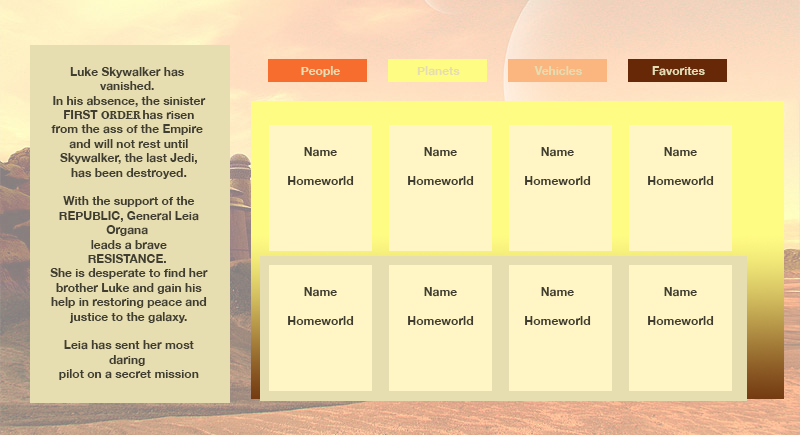
<style>
.page{position:relative;width:800px;height:435px;background:#fff5c5}
.page>*{position:absolute;margin:0}
.t1{font:12px "HelveticaNeue-Bold";color:#403d31}
.t2{font:12px "BodoniSvtyTwoITCTT-Bold";color:#403d31}
.t3{font:12px "HelveticaNeue-Bold";color:#e6ddb1}
</style>
<div class="page">
<p class="t1" style="left:50px;top:67px;width:158px;height:313px;text-align:center">Luke Skywalker has vanished.<br> In his absence, the sinister<br> FIRST <span class="t2">ORDER </span>has risen from the ass of the Empire<br> and will not rest until<br> Skywalker, the last Jedi,<br> has been destroyed.<br> <br> With the support of the<br> REPUBLIC, General Leia Organa<br> leads a brave RESISTANCE.<br> She is desperate to find her<br> brother Luke and gain his<br> help in restoring peace and<br> justice to the galaxy.<br> <br> Leia has sent her most daring<br> pilot on a secret mission<br> to Jakku, where an old ally<br> has discovered a clue to<br> Luke's whereabouts....<br>The Force Awakens<br>2015-12-11</p>
<p class="t3" style="left:301px;top:66px;width:39px;height:11px">People</p>
<p class="t3" style="left:417px;top:66px;width:43px;height:10px">Planets</p>
<p class="t3" style="left:534px;top:66px;width:48px;height:9px">Vehicles</p>
<p class="t3" style="left:652px;top:66px;width:53px;height:10px">Favorites</p>
<p class="t1" style="left:288px;top:147px;width:66px;height:38px;text-align:center">Name<br><br>Homeworld</p>
<p class="t1" style="left:408px;top:147px;width:66px;height:38px;text-align:center">Name<br><br>Homeworld</p>
<p class="t1" style="left:525px;top:147px;width:66px;height:38px;text-align:center">Name<br><br>Homeworld</p>
<p class="t1" style="left:648px;top:147px;width:66px;height:38px;text-align:center">Name<br><br>Homeworld</p>
</div>
